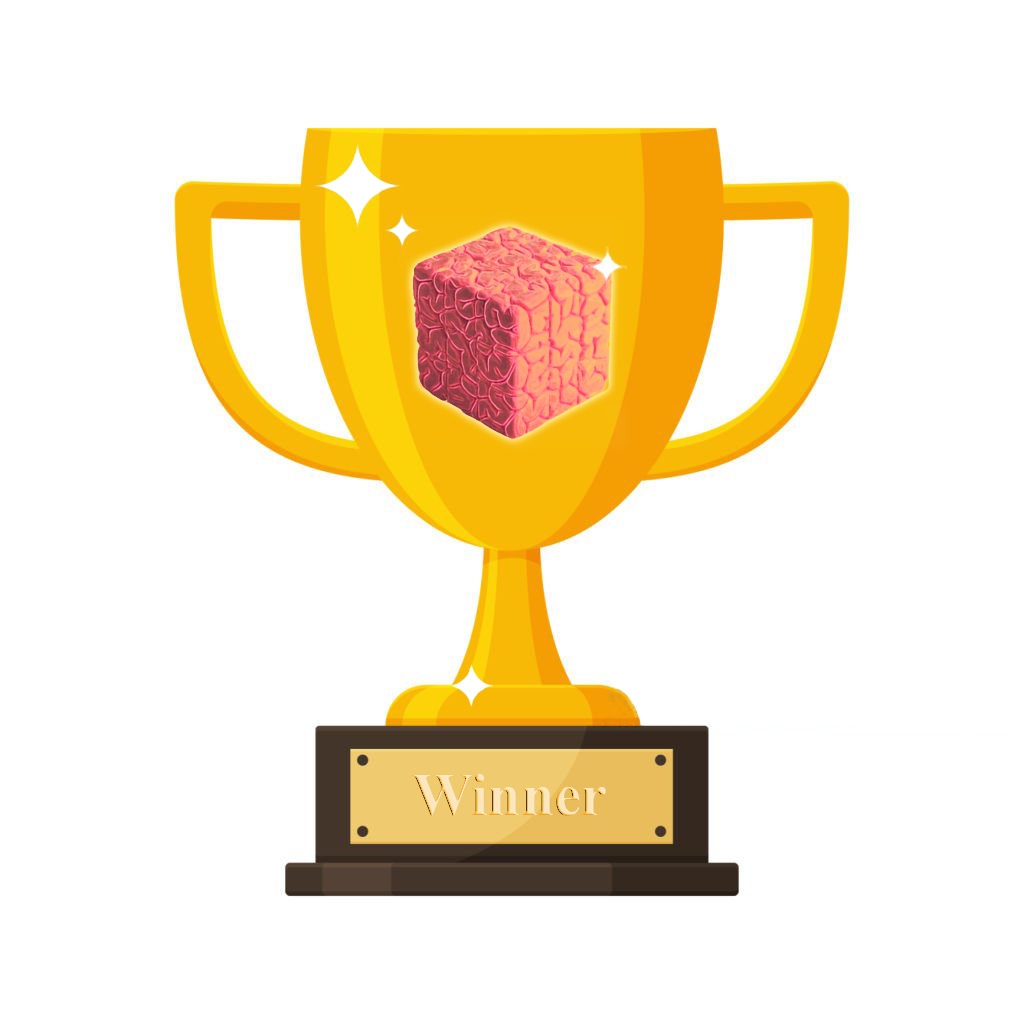
<style>
.page{position:relative;width:1024px;height:1024px;background:#ffffff}
.page>*{position:absolute;margin:0}
.t1{font:59.8px "TimesNewRomanPS-BoldMT"}
</style>
<div class="page">
<p class="t1" style="left:412px;top:774px;width:194px;height:42px">Winner</p>
</div>
